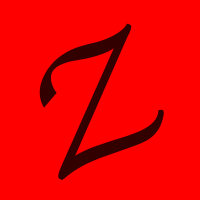
<style>
.page{position:relative;width:200px;height:200px;background:#ff0000}
.page>*{position:absolute;margin:0}
.t1{font:163.4px "Apple-Chancery";color:#330000;scale:1.38 1}
</style>
<div class="page">
<p class="t1" style="left:39px;top:23px;width:125px;height:157px;rotate:-25deg">Z</p>
</div>
